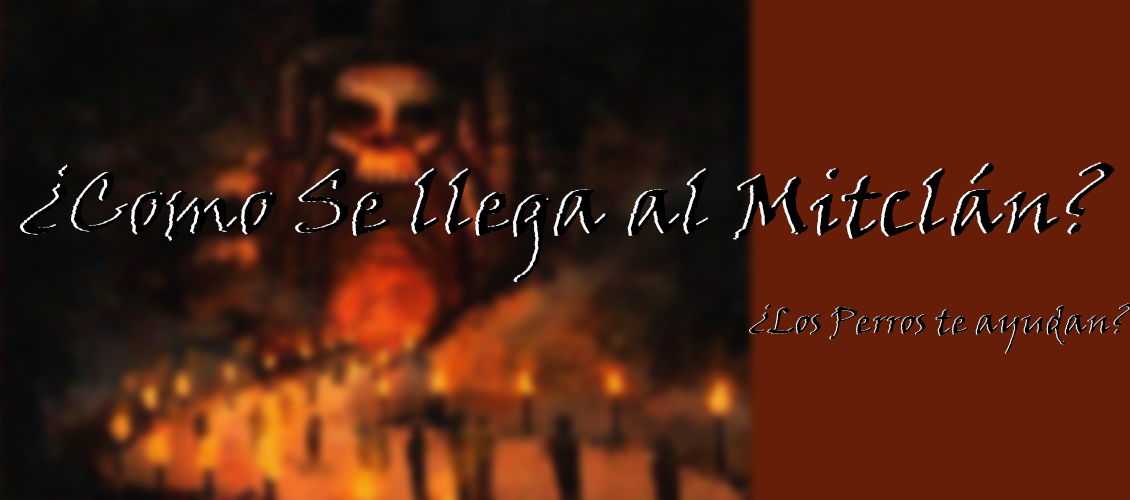
<style>
.page{position:relative;width:1130px;height:500px;background:#661e08}
.page>*{position:absolute;margin:0}
.t1{font:85px "VinerHandITC"}
.t2{font:85px "VinerHandITC";color:#000000}
</style>
<div class="page">
<p class="t1" style="left:20px;top:162px;width:1092px;height:121px">¿Como Se llega al Mitclán?</p>
<p class="t2" style="left:23px;top:162px;width:1092px;height:121px">¿Como Se llega al Mitclán?</p>
</div>
